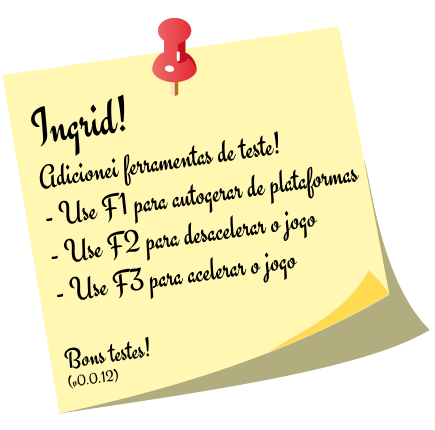
<style>
.page{position:relative;width:435px;height:430px;background:#fff7b2}
.page>*{position:absolute;margin:0}
.t1{font:32px "Engagement-Regular";color:#000000}
.t2{font:52px/44px "Engagement-Regular";color:#000000}
.t3{font:32px/44px "Engagement-Regular";color:#000000}
.t4{font:28px "Engagement-Regular";color:#000000}
.t5{font:16px "Engagement-Regular";color:#000000}
</style>
<div class="page">
<p class="t1" style="left:30px;top:94px;width:329px;height:295px;rotate:-8deg"><span class="t2">Ingrid! <br></span><span class="t3">Adicionei ferramentas de teste!<br></span>- Use F1 para autogerar de plataformas<br>- Use F2 para desacelerar o jogo<br>- Use F3 para acelerar o jogo<br><br><span class="t4">Bons testes!<br></span><span class="t5">(v0.0.12)</span></p>
</div>
